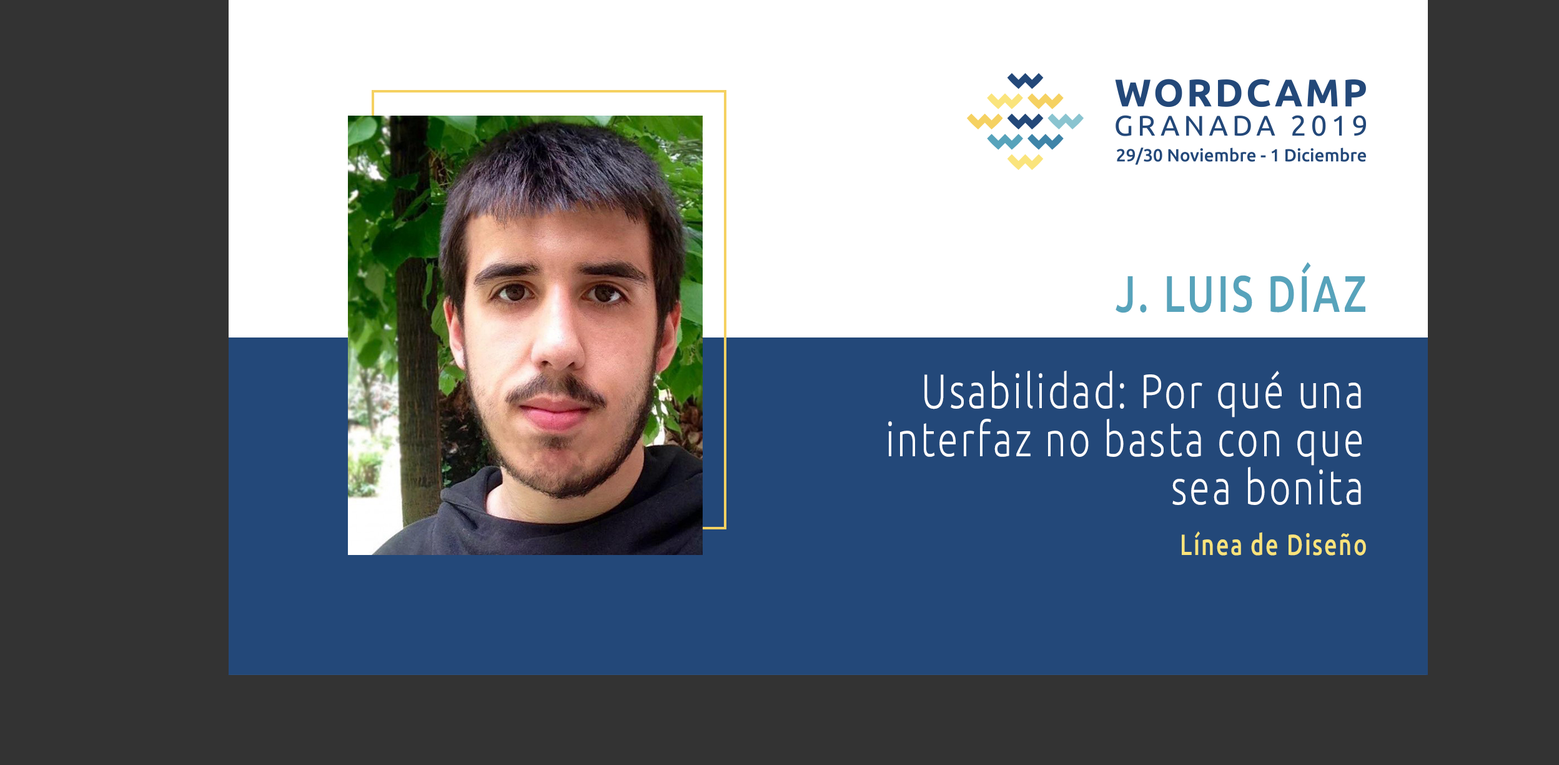
<style>
.page{position:relative;width:1559px;height:765px;background:#333333}
.page>*{position:absolute;margin:0}
.t1{font:51.4px "Ubuntu-Medium";letter-spacing:0.068em;color:#57a3bb;text-transform:uppercase;scale:0.77 1}
.t2{font:48.2px/48.2px "Ubuntu-Light";letter-spacing:0.068em;color:#ffffff;scale:0.77 1}
.t3{font:29.2px "Ubuntu-Medium";letter-spacing:0.068em;color:#f9e37b;scale:0.77 1}
</style>
<div class="page">
<p class="t1" style="left:1116px;top:262px;width:250px;height:51px">J. Luis Díaz</p>
<p class="t2" style="left:888px;top:370px;width:474px;height:135px;text-align:right">Usabilidad: Por qué una interfaz no basta con que sea bonita</p>
<p class="t3" style="left:1182px;top:531px;width:184px;height:24px">Línea de Diseño</p>
</div>
